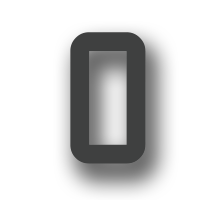
<style>
.page{position:relative;width:215px;height:200px;background:#ffffff}
.page>*{position:absolute;margin:0}
.t1{font:150px "Manteka";color:#3f4040}
</style>
<div class="page">
<p class="t1" style="left:70px;top:32px;width:76px;height:132px">O</p>
</div>
